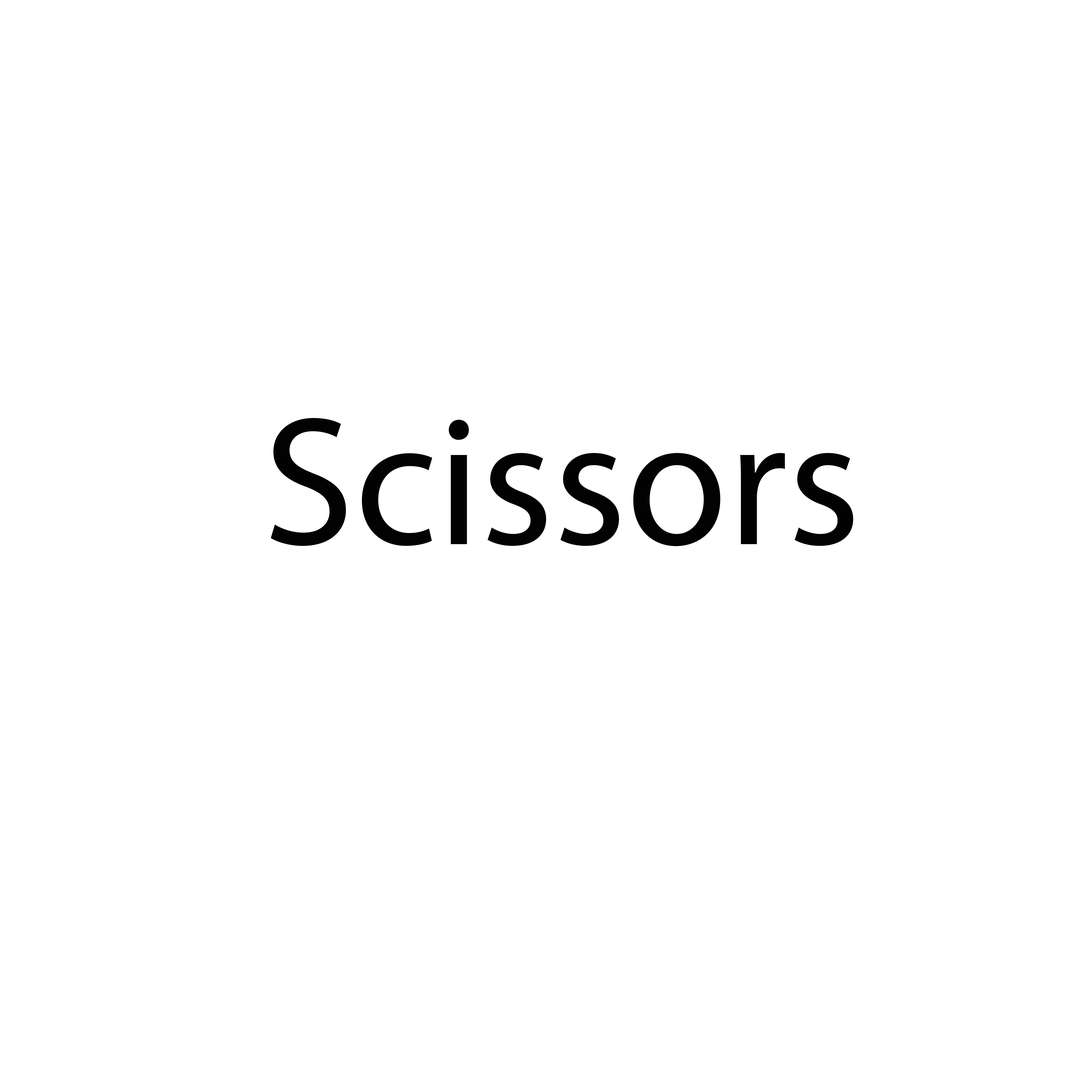
<style>
.page{position:relative;width:1092px;height:1092px;background:#ffffff}
.page>*{position:absolute;margin:0}
.t1{font:184.1px "MyriadPro-Regular";color:#020202}
</style>
<div class="page">
<p class="t1" style="left:271px;top:418px;width:582px;height:128px">Scissors</p>
</div>
